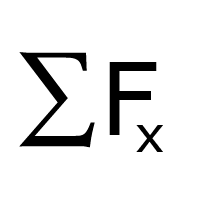
<style>
.page{position:relative;width:200px;height:200px;background:#ffffff}
.page>*{position:absolute;margin:0}
.t1{font:110px "KozMinPro-Light";color:#000000}
.t2{font:100px "Verdana";color:#000000}
.t3{font:50px "Verdana";color:#000000}
</style>
<div class="page">
<p class="t1" style="left:19px;top:52px;width:76px;height:96px">∑</p>
<p class="t2" style="left:109px;top:62px;width:48px;height:73px">F</p>
<p class="t3" style="left:136px;top:125px;width:27px;height:27px">x</p>
</div>
